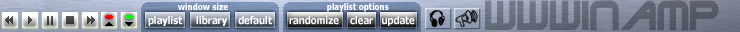
<style>
.page{position:relative;width:740px;height:32px}
.page>*{position:absolute;margin:0}
.t1{font:9px "Tahoma-Bold";color:#ffffff;scale:0.9 1}
.t2{font:45px "TerminatorTwo";color:#5f6571;scale:0.9 1}
.t3{font:10.5px "Tahoma-Bold";color:#ffffff;scale:0.9 1}
</style>
<div class="page">
<p class="t1" style="left:178px;top:3px;width:50px;height:7px">window size</p>
<p class="t1" style="left:327px;top:3px;width:62px;height:9px">playlist options</p>
<p class="t2" style="left:485px;top:0px;width:234px;height:31px">WWWinamp</p>
<p class="t3" style="left:148px;top:16px;width:124px;height:10px">playlist     library    default</p>
<p class="t3" style="left:289px;top:16px;width:126px;height:10px">randomize    clear   update</p>
</div>
